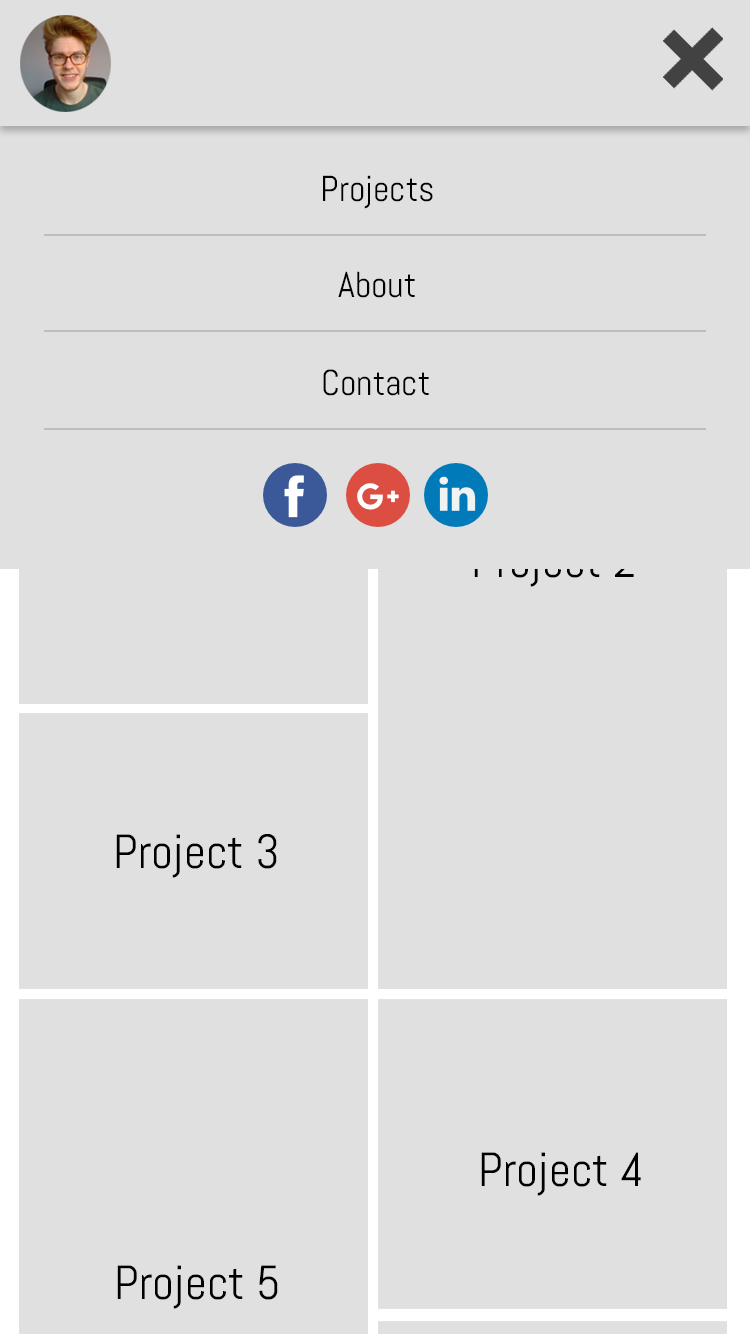
<style>
.page{position:relative;width:750px;height:1334px;background:#e0e0e0}
.page>*{position:absolute;margin:0}
.t1{font:36px "Abel-Regular";color:#000000}
.t2{font:48px "Abel-Regular"}
.t3{font:48px "Abel-Regular";color:#000000}
</style>
<div class="page">
<p class="t1" style="left:323px;top:175px;width:110px;height:34px">Projects</p>
<p class="t1" style="left:338px;top:271px;width:77px;height:27px">About</p>
<p class="t1" style="left:323px;top:369px;width:106px;height:27px">Contact</p>
<p class="t2" style="left:474px;top:543px;width:160px;height:44px">Project 2</p>
<p class="t3" style="left:116px;top:834px;width:161px;height:44px">Project 3</p>
<p class="t3" style="left:481px;top:1152px;width:160px;height:44px">Project 4</p>
<p class="t3" style="left:117px;top:1265px;width:161px;height:44px">Project 5</p>
</div>
